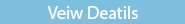
<style>
.page{position:relative;width:185px;height:24px;background:#7ebfdf}
.page>*{position:absolute;margin:0}
.t1{font:18px "MyriadPro-Regular";color:#ffffff}
</style>
<div class="page">
<p class="t1" style="left:47px;top:6px;width:91px;height:13px">Veiw Deatils</p>
</div>
